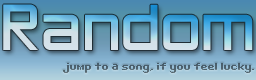
<style>
.page{position:relative;width:256px;height:80px}
.page>*{position:absolute;margin:0}
.t1{font:60px "ZeroThrees"}
.t2{font:10px "Bit-Darling10-(sRB)";color:#4e626e}
</style>
<div class="page">
<p class="t1" style="left:3px;top:4px;width:250px;height:46px">Random</p>
<p class="t2" style="left:63px;top:63px;width:191px;height:10px">jump to a song, if you feel lucky.</p>
</div>
